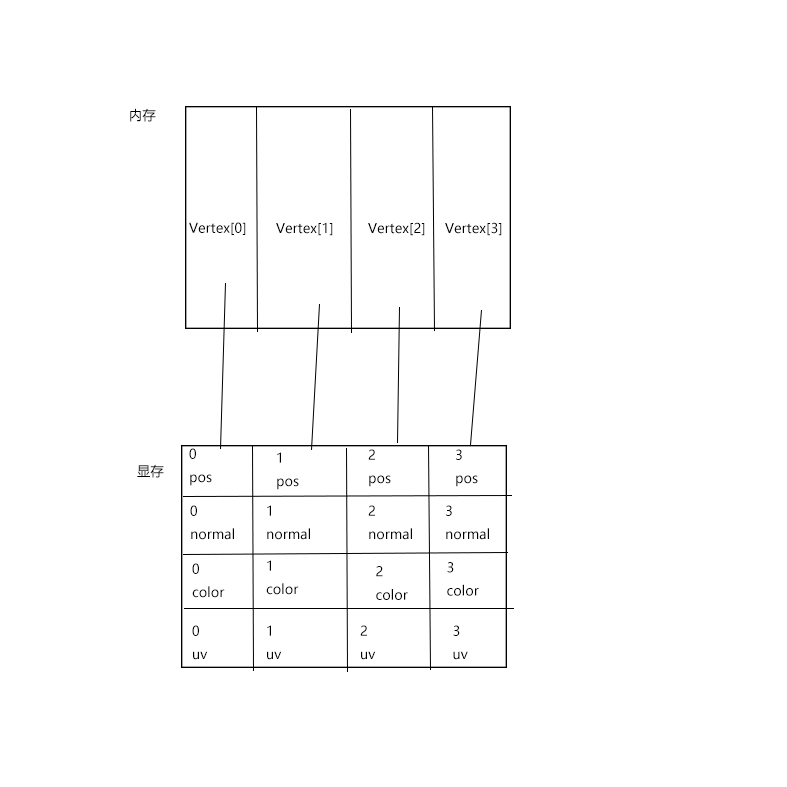
<style>
.page{position:relative;width:787px;height:787px;background:#ffffff}
.page>*{position:absolute;margin:0}
.t1{font:13.3px "MicrosoftYaHei";color:#000000}
</style>
<div class="page">
<p class="t1" style="left:130px;top:108px;width:26px;height:14px">内存</p>
<p class="t1" style="left:189px;top:222px;width:57px;height:13px">Vertex[0]</p>
<p class="t1" style="left:276px;top:222px;width:57px;height:14px">Vertex[1]</p>
<p class="t1" style="left:368px;top:222px;width:57px;height:14px">Vertex[2]</p>
<p class="t1" style="left:445px;top:222px;width:57px;height:14px">Vertex[3]</p>
<p class="t1" style="left:189px;top:448px;width:23px;height:38px">0<br>pos</p>
<p class="t1" style="left:368px;top:449px;width:23px;height:38px">2<br>pos</p>
<p class="t1" style="left:456px;top:449px;width:22px;height:38px">3<br>pos</p>
<p class="t1" style="left:277px;top:452px;width:22px;height:38px">1<br>pos</p>
<p class="t1" style="left:137px;top:464px;width:27px;height:14px">显存</p>
<p class="t1" style="left:190px;top:505px;width:44px;height:35px">0<br>normal</p>
<p class="t1" style="left:267px;top:505px;width:43px;height:35px">1<br>normal</p>
<p class="t1" style="left:368px;top:505px;width:44px;height:35px">2<br>normal</p>
<p class="t1" style="left:446px;top:505px;width:43px;height:35px">3<br>normal</p>
<p class="t1" style="left:192px;top:563px;width:33px;height:35px">0<br>color</p>
<p class="t1" style="left:266px;top:560px;width:33px;height:35px">1<br>color</p>
<p class="t1" style="left:376px;top:566px;width:32px;height:34px">2<br>color</p>
<p class="t1" style="left:447px;top:562px;width:32px;height:34px">3<br>color</p>
<p class="t1" style="left:192px;top:625px;width:16px;height:35px">0<br>uv</p>
<p class="t1" style="left:267px;top:625px;width:15px;height:35px">1<br>uv</p>
<p class="t1" style="left:360px;top:625px;width:16px;height:35px">2<br>uv</p>
<p class="t1" style="left:453px;top:625px;width:15px;height:35px">3<br>uv</p>
</div>
